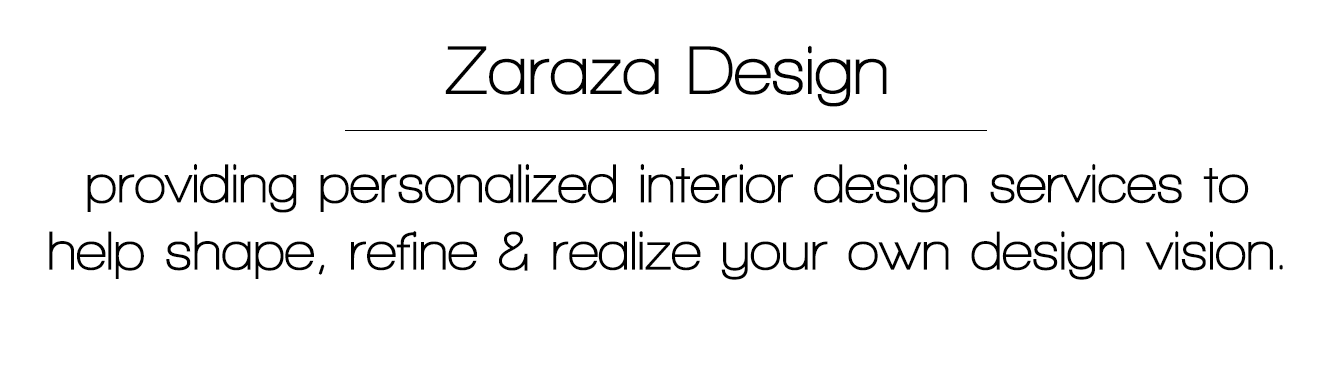
<style>
.page{position:relative;width:1340px;height:380px;background:#ffffff}
.page>*{position:absolute;margin:0}
.t1{font:70px "WalkwayBold";color:#000000}
.t2{font:55.9px "WalkwayBold";color:#000000}
</style>
<div class="page">
<p class="t1" style="left:445px;top:45px;width:442px;height:62px">Zaraza Design</p>
<p class="t2" style="left:49px;top:163px;width:1234px;height:117px;text-align:center">providing personalized interior design services to<br>help shape, refine &amp; realize your own design vision.</p>
</div>
